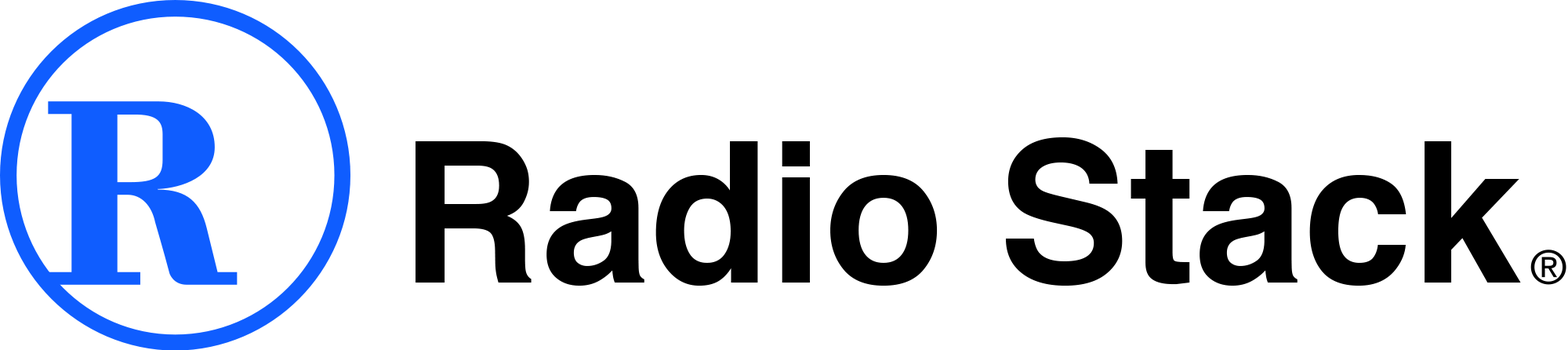
<style>
.page{position:relative;width:1568px;height:350px;background:#ffffff}
.page>*{position:absolute;margin:0}
.t1{font:196px "Helvetica-Bold";color:#000000}
</style>
<div class="page">
<p class="t1" style="left:416px;top:137px;width:1105px;height:148px">Radio Stack</p>
</div>
